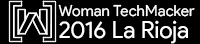
<style>
.page{position:relative;width:200px;height:44px;background:#000000}
.page>*{position:absolute;margin:0}
.t1{font:15.3px/18.1px "ProductSans-Regular";color:#ffffff}
.t2{font:23.7px/22.3px "ProductSans-Regular";color:#ffffff}
</style>
<div class="page">
<p class="t1" style="left:58px;top:4px;width:137px;height:40px">Woman TechMacker<br><span class="t2">2016 La Rioja</span></p>
</div>
